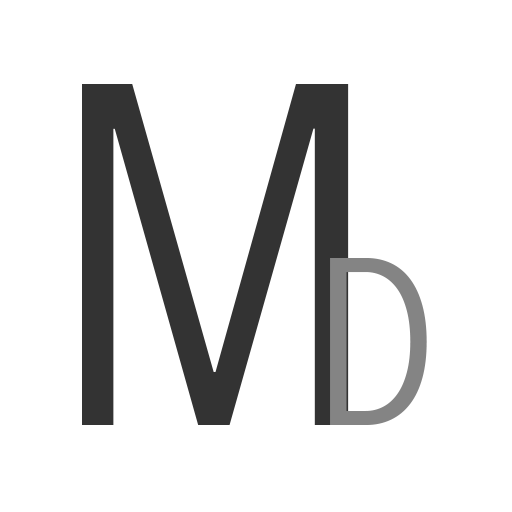
<style>
.page{position:relative;width:512px;height:512px;background:#ffffff}
.page>*{position:absolute;margin:0}
.t1{font:482.3px "AvenirNextCondensed-Regular";color:#333333}
.t2{font:236.1px "AvenirNextCondensed-Regular";color:#848484}
</style>
<div class="page">
<p class="t1" style="left:82px;top:84px;width:267px;height:341px">M</p>
<p class="t2" style="left:330px;top:258px;width:97px;height:167px">D</p>
</div>
